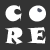
<style>
.page{position:relative;width:50px;height:50px;background:#333333}
.page>*{position:absolute;margin:0}
.t1{font:21.5px "SnapITC-Regular";letter-spacing:0.1em;color:#ffffff}
</style>
<div class="page">
<p class="t1" style="left:5px;top:5px;width:17px;height:17px">C</p>
<p class="t1" style="left:29px;top:5px;width:17px;height:17px">O</p>
<p class="t1" style="left:5px;top:27px;width:18px;height:18px">R</p>
<p class="t1" style="left:27px;top:27px;width:19px;height:17px">E</p>
</div>
